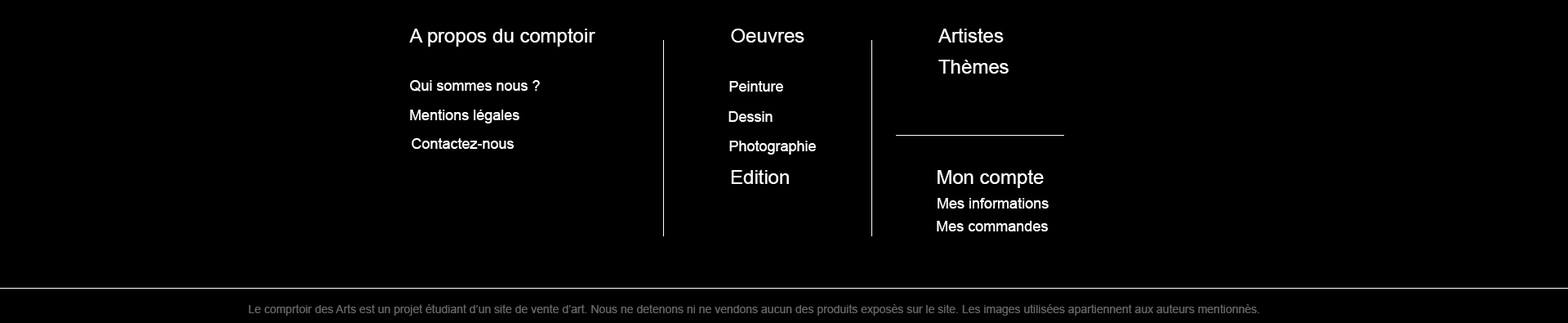
<style>
.page{position:relative;width:1568px;height:323px;background:#000000}
.page>*{position:absolute;margin:0}
.t1{font:19.6px "ArialMT";color:#ffffff}
.t2{font:14.7px "ArialMT";color:#ffffff}
.t3{font:11.4px "ArialMT";color:#646464}
</style>
<div class="page">
<p class="t1" style="left:409px;top:28px;width:186px;height:19px">A propos du comptoir</p>
<p class="t1" style="left:731px;top:29px;width:73px;height:13px">Oeuvres</p>
<p class="t1" style="left:938px;top:28px;width:66px;height:14px">Artistes</p>
<p class="t1" style="left:938px;top:60px;width:71px;height:14px">Thèmes</p>
<p class="t2" style="left:410px;top:80px;width:130px;height:11px">Qui sommes nous ?</p>
<p class="t2" style="left:729px;top:81px;width:54px;height:10px">Peinture</p>
<p class="t2" style="left:410px;top:109px;width:109px;height:14px">Mentions légales</p>
<p class="t2" style="left:728px;top:111px;width:45px;height:11px">Dessin</p>
<p class="t2" style="left:412px;top:138px;width:102px;height:11px">Contactez-nous</p>
<p class="t2" style="left:729px;top:140px;width:87px;height:14px">Photographie</p>
<p class="t1" style="left:731px;top:169px;width:58px;height:15px">Edition</p>
<p class="t1" style="left:938px;top:169px;width:106px;height:19px">Mon compte</p>
<p class="t2" style="left:938px;top:198px;width:111px;height:10px">Mes informations</p>
<p class="t2" style="left:937px;top:220px;width:111px;height:11px">Mes commandes</p>
<p class="t3" style="left:248px;top:304px;width:1011px;height:11px">Le comprtoir des Arts est un projet étudiant d’un site de vente d’art. Nous ne detenons ni ne vendons aucun des produits exposès sur le site. Les images utilisées apartiennent aux auteurs mentionnès.</p>
</div>
